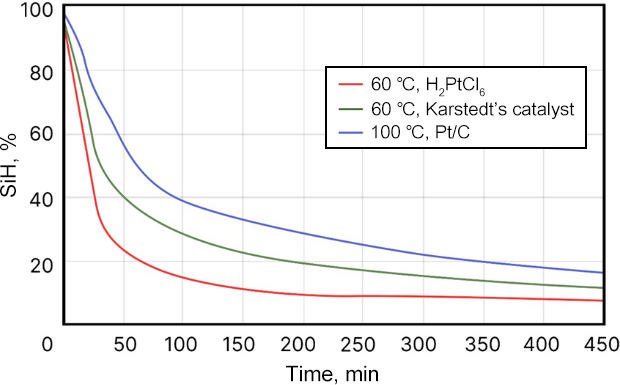
<style>
.page{position:relative;width:620px;height:385px;background:#ffffff}
.page>*{position:absolute;margin:0}
.t1{font:18.3px "ArialUnicodeMS";color:#000000}
.t2{font:21.4px "ArialMT";color:#000000}
</style>
<div class="page">
<p class="t1" style="left:371px;top:77px;width:114px;height:20px">60 ℃, H2PtCl6</p>
<p class="t1" style="left:372px;top:102px;width:203px;height:17px">60 ℃, Karstedt’s catalyst</p>
<p class="t1" style="left:372px;top:125px;width:98px;height:16px">100 ℃, Pt/C</p>
<p class="t2" style="left:0px;top:133px;width:19px;height:64px;rotate:-90deg">SiH, %</p>
<p class="t2" style="left:286px;top:365px;width:92px;height:20px">Time, min</p>
</div>
